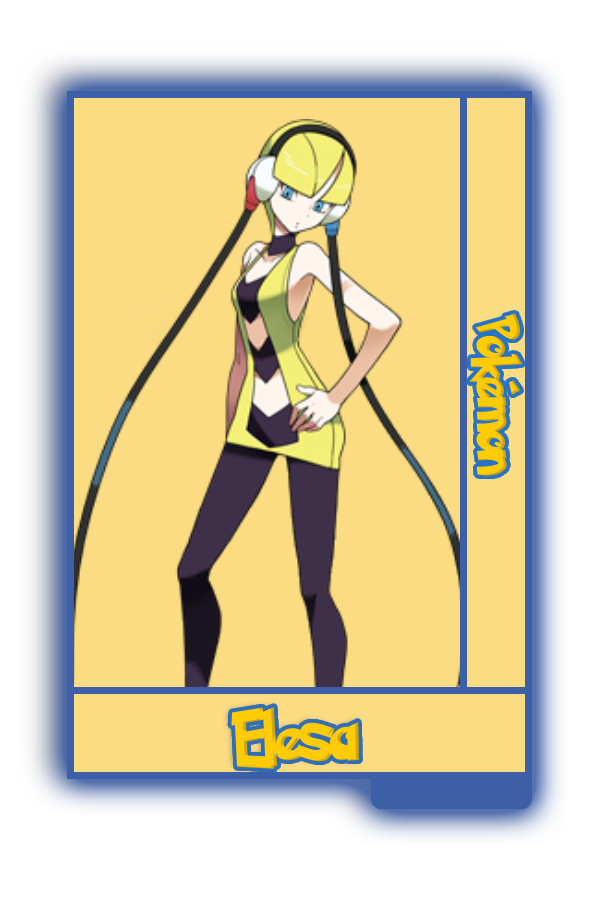
<style>
.page{position:relative;width:600px;height:900px;background:#fbdc83}
.page>*{position:absolute;margin:0}
.t1{font:48.8px "PokemonSolidNormal";color:#ffcb05;scale:0.8 1}
.t2{font:56.6px "PokemonSolidNormal";color:#ffcb05;scale:0.92 1}
</style>
<div class="page">
<p class="t1" style="left:469px;top:313px;width:54px;height:163px;rotate:90deg">Pokémon</p>
<p class="t2" style="left:231px;top:706px;width:128px;height:63px">Elesa</p>
</div>
